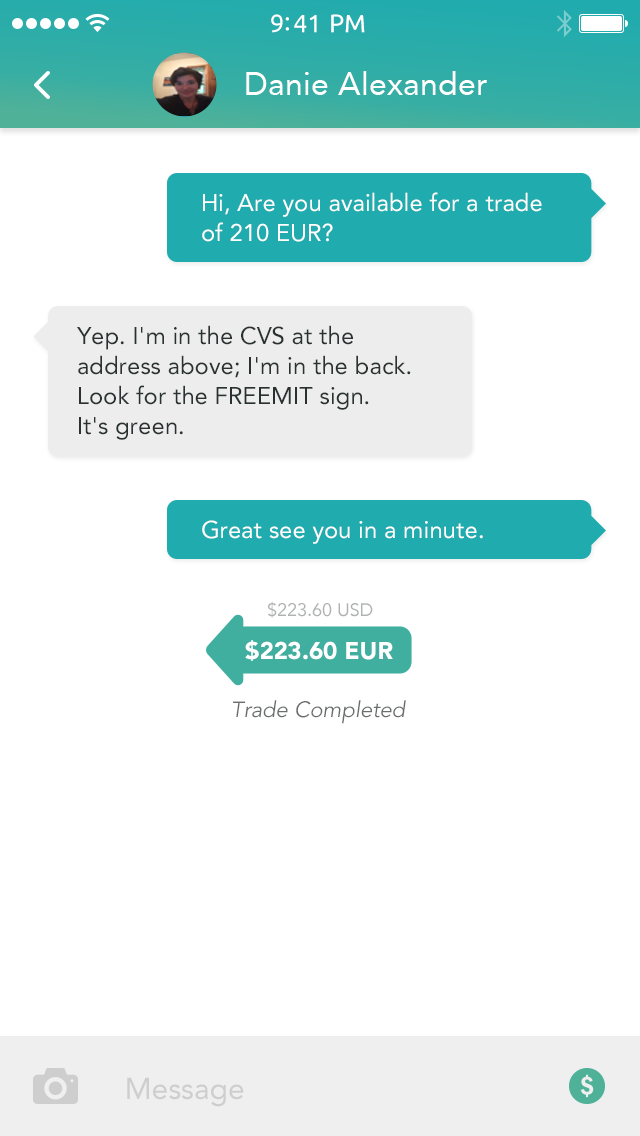
<style>
.page{position:relative;width:640px;height:1136px;background:#ffffff}
.page>*{position:absolute;margin:0}
.t1{font:25px "Ubuntu";color:#ffffff}
.t2{font:32px "Avenir-Roman";color:#ffffff}
.t3{font:24px/30px "Avenir-Roman";color:#ffffff}
.t4{font:24px/30px "Avenir-Roman";color:#2a3231}
.t5{font:24px "Avenir-Roman";color:#ffffff}
.t6{font:18px "Avenir-Roman";color:#b0b2b2}
.t7{font:24px "Avenir-Black";color:#ffffff}
.t8{font:22px "Avenir-BookOblique";color:#696d6d}
.t9{font:30px "Avenir-Roman";color:#cecece}
</style>
<div class="page">
<p class="t1" style="left:271px;top:14px;width:94px;height:19px">9:41 PM</p>
<p class="t2" style="left:246px;top:71px;width:241px;height:24px">Danie Alexander</p>
<p class="t3" style="left:202px;top:192px;width:340px;height:50px">Hi, Are you available for a trade of 210 EUR?</p>
<p class="t4" style="left:77px;top:325px;width:334px;height:115px">Yep. I'm in the CVS at the<br>address above; I'm in the back.<br>Look for the FREEMIT sign.<br>It's green.</p>
<p class="t5" style="left:202px;top:520px;width:281px;height:24px">Great see you in a minute.</p>
<p class="t6" style="left:268px;top:601px;width:105px;height:17px">$223.60 USD</p>
<p class="t7" style="left:245px;top:640px;width:148px;height:21px">$223.60 EUR</p>
<p class="t8" style="left:233px;top:700px;width:173px;height:24px">Trade Completed</p>
<p class="t9" style="left:127px;top:1077px;width:117px;height:30px">Message</p>
</div>
